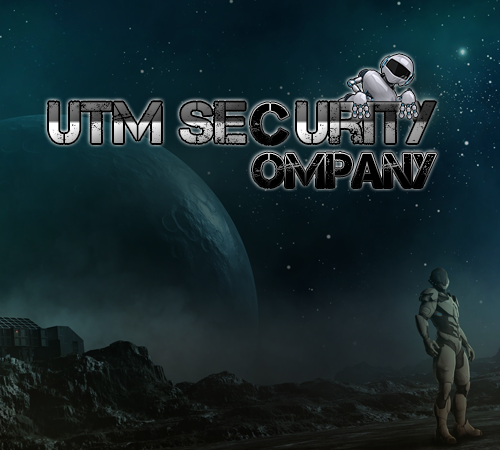
<style>
.page{position:relative;width:500px;height:450px}
.page>*{position:absolute;margin:0}
.t1{font:58px "Captureit"}
.t2{font:58px "Captureit";color:#000000}
.t3{font:47.4px "Captureit";color:#000000}
</style>
<div class="page">
<p class="t1" style="left:49px;top:102px;width:387px;height:41px">UTM Se   urity</p>
<p class="t2" style="left:251px;top:103px;width:38px;height:41px">C</p>
<p class="t3" style="left:253px;top:152px;width:183px;height:35px">ompany</p>
</div>
